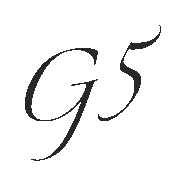
<style>
.page{position:relative;width:180px;height:180px;background:#ffffff}
.page>*{position:absolute;margin:0}
.t1{font:60px "Zapfino";letter-spacing:0.1em;color:#282828}
</style>
<div class="page">
<p class="t1" style="left:25px;top:25px;width:136px;height:136px;rotate:-7deg">G5</p>
</div>
